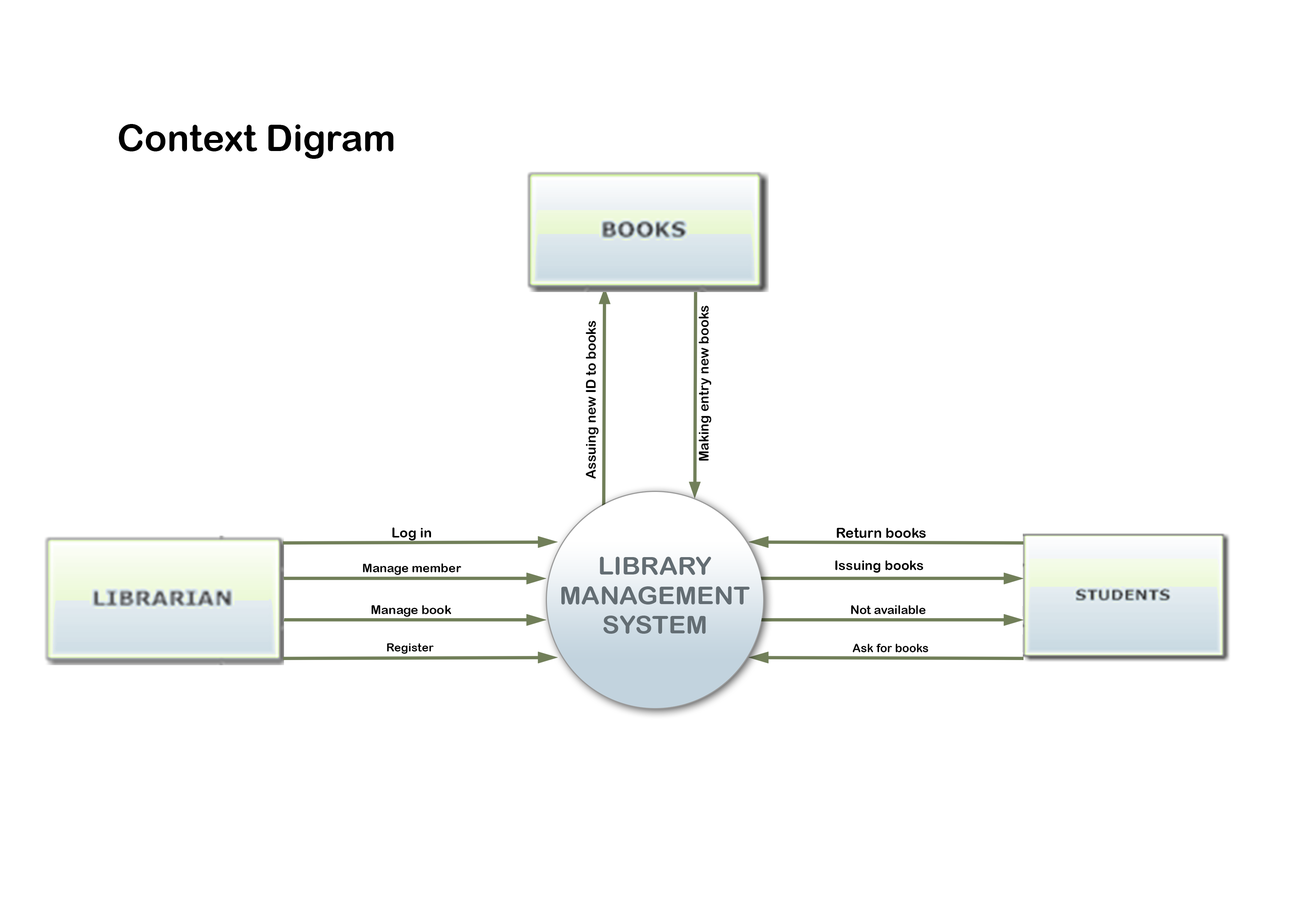
<style>
.page{position:relative;width:1299px;height:918px;background:#ffffff}
.page>*{position:absolute;margin:0}
.t1{font:37px "ArialRoundedMTBold";color:#000000}
.t2{font:13.4px "ArialRoundedMTBold";color:#000000}
.t3{font:13.5px "ArialRoundedMTBold";color:#000000}
.t4{font:13.8px "ArialRoundedMTBold";color:#000000}
.t5{font:14.1px "ArialRoundedMTBold";color:#000000}
.t6{font:12.4px "ArialRoundedMTBold";color:#000000}
.t7{font:12.1px "ArialRoundedMTBold";color:#000000}
.t8{font:11.4px "ArialRoundedMTBold";color:#000000}
.t9{font:11.7px "ArialRoundedMTBold";color:#000000}
</style>
<div class="page">
<p class="t1" style="left:119px;top:124px;width:275px;height:35px">Context Digram</p>
<p class="t2" style="left:698px;top:306px;width:13px;height:155px;rotate:-90deg">Making entry new books</p>
<p class="t3" style="left:586px;top:321px;width:13px;height:158px;rotate:-90deg">Assuing new ID to books</p>
<p class="t4" style="left:392px;top:528px;width:39px;height:13px">Log in</p>
<p class="t5" style="left:836px;top:528px;width:90px;height:10px">Return books</p>
<p class="t6" style="left:363px;top:563px;width:98px;height:12px">Manage member</p>
<p class="t2" style="left:835px;top:561px;width:88px;height:12px">Issuing books</p>
<p class="t6" style="left:371px;top:605px;width:80px;height:12px">Manage book</p>
<p class="t7" style="left:851px;top:605px;width:75px;height:9px">Not available</p>
<p class="t8" style="left:387px;top:643px;width:47px;height:11px">Register</p>
<p class="t9" style="left:852px;top:644px;width:76px;height:8px">Ask for books</p>
</div>
